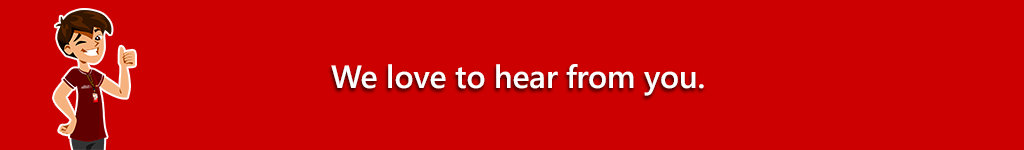
<style>
.page{position:relative;width:1024px;height:150px;background:#cc0000}
.page>*{position:absolute;margin:0}
.t1{font:32px "SegoeUI-Semibold";color:#ffffff}
</style>
<div class="page">
<p class="t1" style="left:331px;top:64px;width:373px;height:32px">We love to hear from you.</p>
</div>
